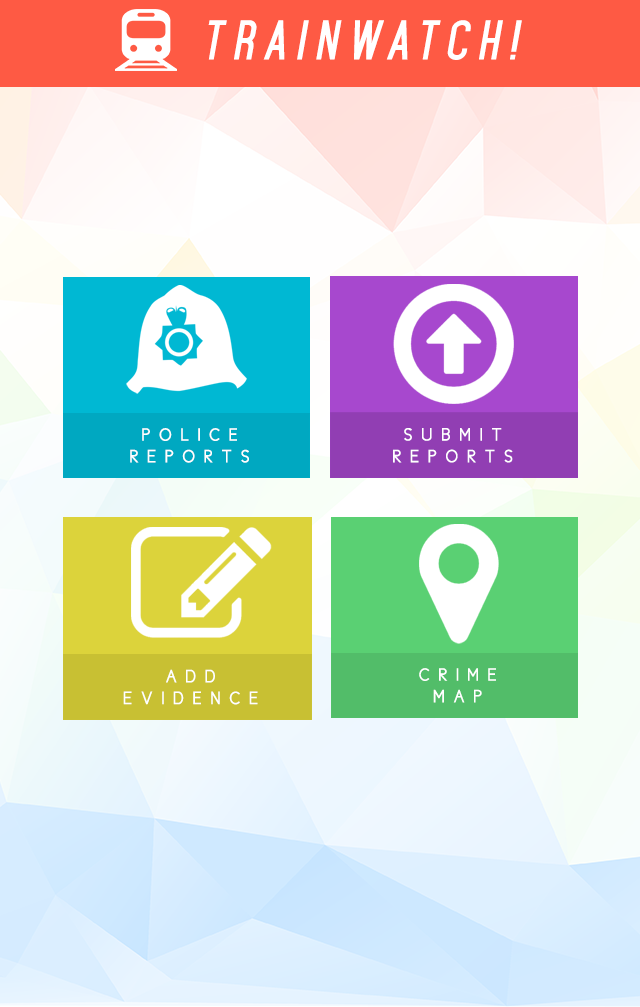
<style>
.page{position:relative;width:640px;height:1007px}
.page>*{position:absolute;margin:0}
.t1{font:48px "Mohave-BoldItalic";letter-spacing:0.2em;color:#ffffff;text-transform:uppercase}
.t2{font:18px "CicleGordita";letter-spacing:0.5em;color:#ffffff;text-transform:uppercase}
.t3{font:18.1px "CicleGordita";letter-spacing:0.5em;color:#ffffff;text-transform:uppercase}
.t4{font:18.2px "CicleGordita";letter-spacing:0.5em;color:#ffffff;text-transform:uppercase}
</style>
<div class="page">
<p class="t1" style="left:208px;top:20px;width:314px;height:40px">Trainwatch!</p>
<p class="t2" style="left:130px;top:428px;width:119px;height:35px;text-align:center">Police<br>Reports</p>
<p class="t3" style="left:393px;top:428px;width:120px;height:35px;text-align:center">Submit<br>Reports</p>
<p class="t4" style="left:123px;top:669px;width:135px;height:36px;text-align:center">AdD<br>Evidence</p>
<p class="t2" style="left:419px;top:668px;width:77px;height:35px;text-align:center">Crime<br>Map</p>
</div>
